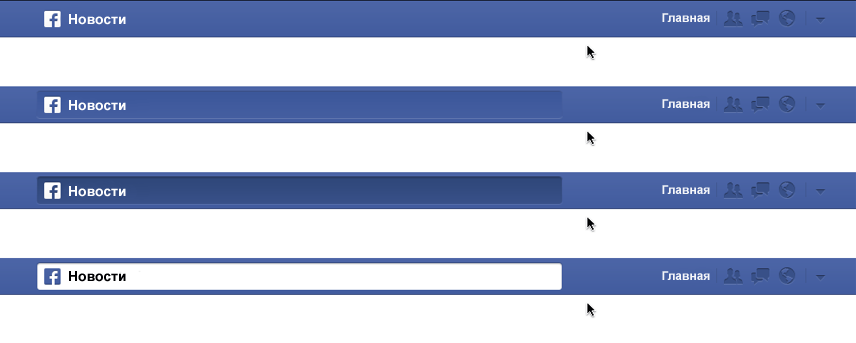
<style>
.page{position:relative;width:856px;height:343px;background:#ffffff}
.page>*{position:absolute;margin:0}
.t1{font:14px "Arial-BoldMT";color:#fefefe}
.t2{font:12px "Arial-BoldMT";color:#f5f6f9}
.t3{font:14px "Arial-BoldMT";color:#000002}
</style>
<div class="page">
<p class="t1" style="left:69px;top:14px;width:57px;height:11px">Новости</p>
<p class="t2" style="left:662px;top:13px;width:48px;height:9px">Главная</p>
<p class="t1" style="left:69px;top:100px;width:57px;height:11px">Новости</p>
<p class="t2" style="left:662px;top:99px;width:48px;height:9px">Главная</p>
<p class="t2" style="left:662px;top:185px;width:48px;height:9px">Главная</p>
<p class="t1" style="left:69px;top:186px;width:57px;height:11px">Новости</p>
<p class="t3" style="left:69px;top:271px;width:57px;height:11px">Новости</p>
<p class="t2" style="left:662px;top:271px;width:48px;height:9px">Главная</p>
</div>
